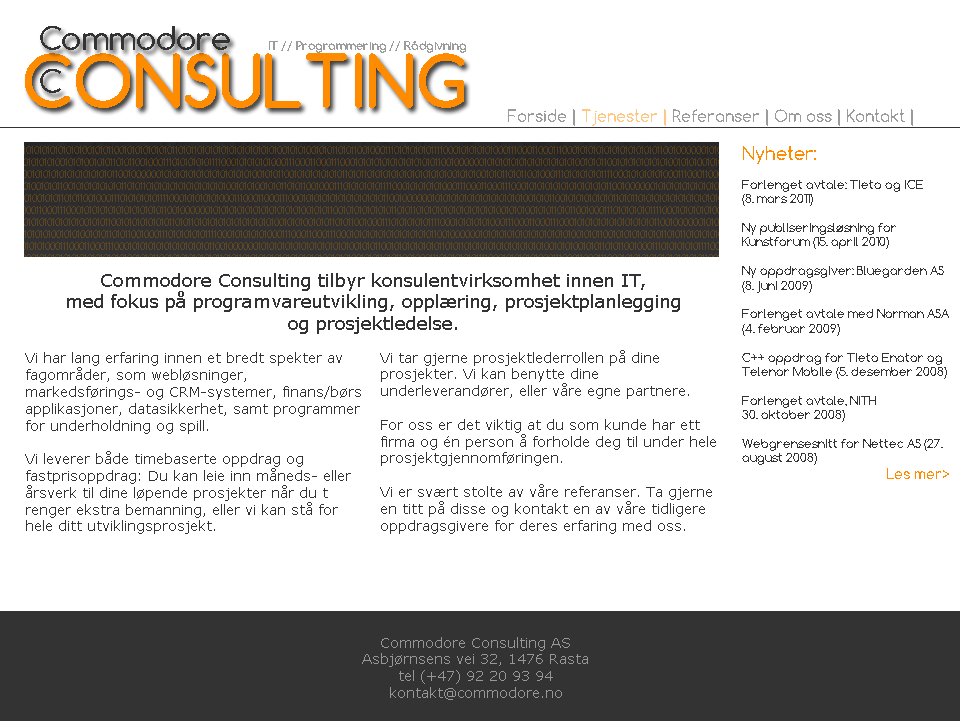
<style>
.page{position:relative;width:960px;height:721px;background:#ffffff}
.page>*{position:absolute;margin:0}
.t1{font:16px "Comfortaa";color:#9b9b9b}
.t2{font:12px "Comfortaa";color:#333333}
.t3{font:18px "Comfortaa";color:#ff8c00}
.t4{font:14px "Comfortaa";color:#ff8c00}
.t5{font:14px "Verdana";color:#333333}
.t6{font:18px "Verdana";color:#333333}
.t7{font:14px "Verdana";color:#979797}
</style>
<div class="page">
<p class="t1" style="left:508px;top:109px;width:405px;height:17px">Forside | Tjenester | Referanser | Om oss | Kontakt |</p>
<p class="t2" style="left:742px;top:146px;width:207px;height:333px"><span class="t3">Nyheter:<br></span><br>Forlenget avtale: Tieto og ICE <br>(8. mars 2011)<br><br>Ny publiseringsløsning for <br>Kunstforum (15. april 2010)<br><br>Ny oppdragsgiver: Bluegarden AS (8. juni 2009)<br><br>Forlenget avtale med Norman ASA (4. februar 2009)<br><br>C++ oppdrag for Tieto Enator og Telenor Mobile (5. desember 2008)<br><br>Forlenget avtale, NITH <br>30. oktober 2008)<br><br>Webgrensesnitt for Nettec AS (27. august 2008)<br>    <span class="t4">Les mer&gt;</span></p>
<p class="t5" style="left:25px;top:273px;width:655px;height:261px;text-align:center"><span class="t6">Commodore Consulting tilbyr konsulentvirksomhet innen IT, <br>med fokus på programvareutvikling, opplæring, prosjektplanlegging <br>og prosjektledelse.<br></span><br>Vi har lang erfaring innen et bredt spekter av <br>fagområder, som webløsninger, <br>markedsførings- og CRM-systemer, finans/børs <br>applikasjoner, datasikkerhet, samt programmer <br>for underholdning og spill.<br><br>Vi leverer både timebaserte oppdrag og <br>fastprisoppdrag: Du kan leie inn måneds- eller <br>årsverk til dine løpende prosjekter når du t<br>renger ekstra bemanning, eller vi kan stå for <br>hele ditt utviklingsprosjekt.</p>
<p class="t5" style="left:380px;top:350px;width:336px;height:184px">Vi tar gjerne prosjektlederrollen på dine <br>prosjekter. Vi kan benytte dine <br>underleverandører, eller våre egne partnere.<br><br>For oss er det viktig at du som kunde har ett firma og én person å forholde deg til under hele prosjektgjennomføringen.<br><br>Vi er svært stolte av våre referanser. Ta gjerne en titt på disse og kontakt en av våre tidligere oppdragsgivere for deres erfaring med oss.</p>
<p class="t7" style="left:362px;top:637px;width:226px;height:63px;text-align:center">Commodore Consulting AS<br>Asbjørnsens vei 32, 1476 Rasta<br>tel (+47) 92 20 93 94<br>kontakt@commodore.no</p>
</div>
